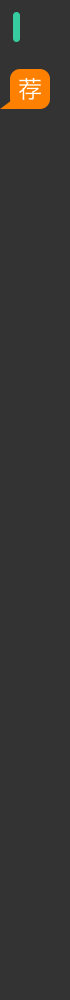
<style>
.page{position:relative;width:70px;height:1000px;background:#333333}
.page>*{position:absolute;margin:0}
.t1{font:24px "HiraginoSansGB-W3";color:#ffffff}
</style>
<div class="page">
<p class="t1" style="left:19px;top:78px;width:22px;height:22px">荐</p>
</div>
